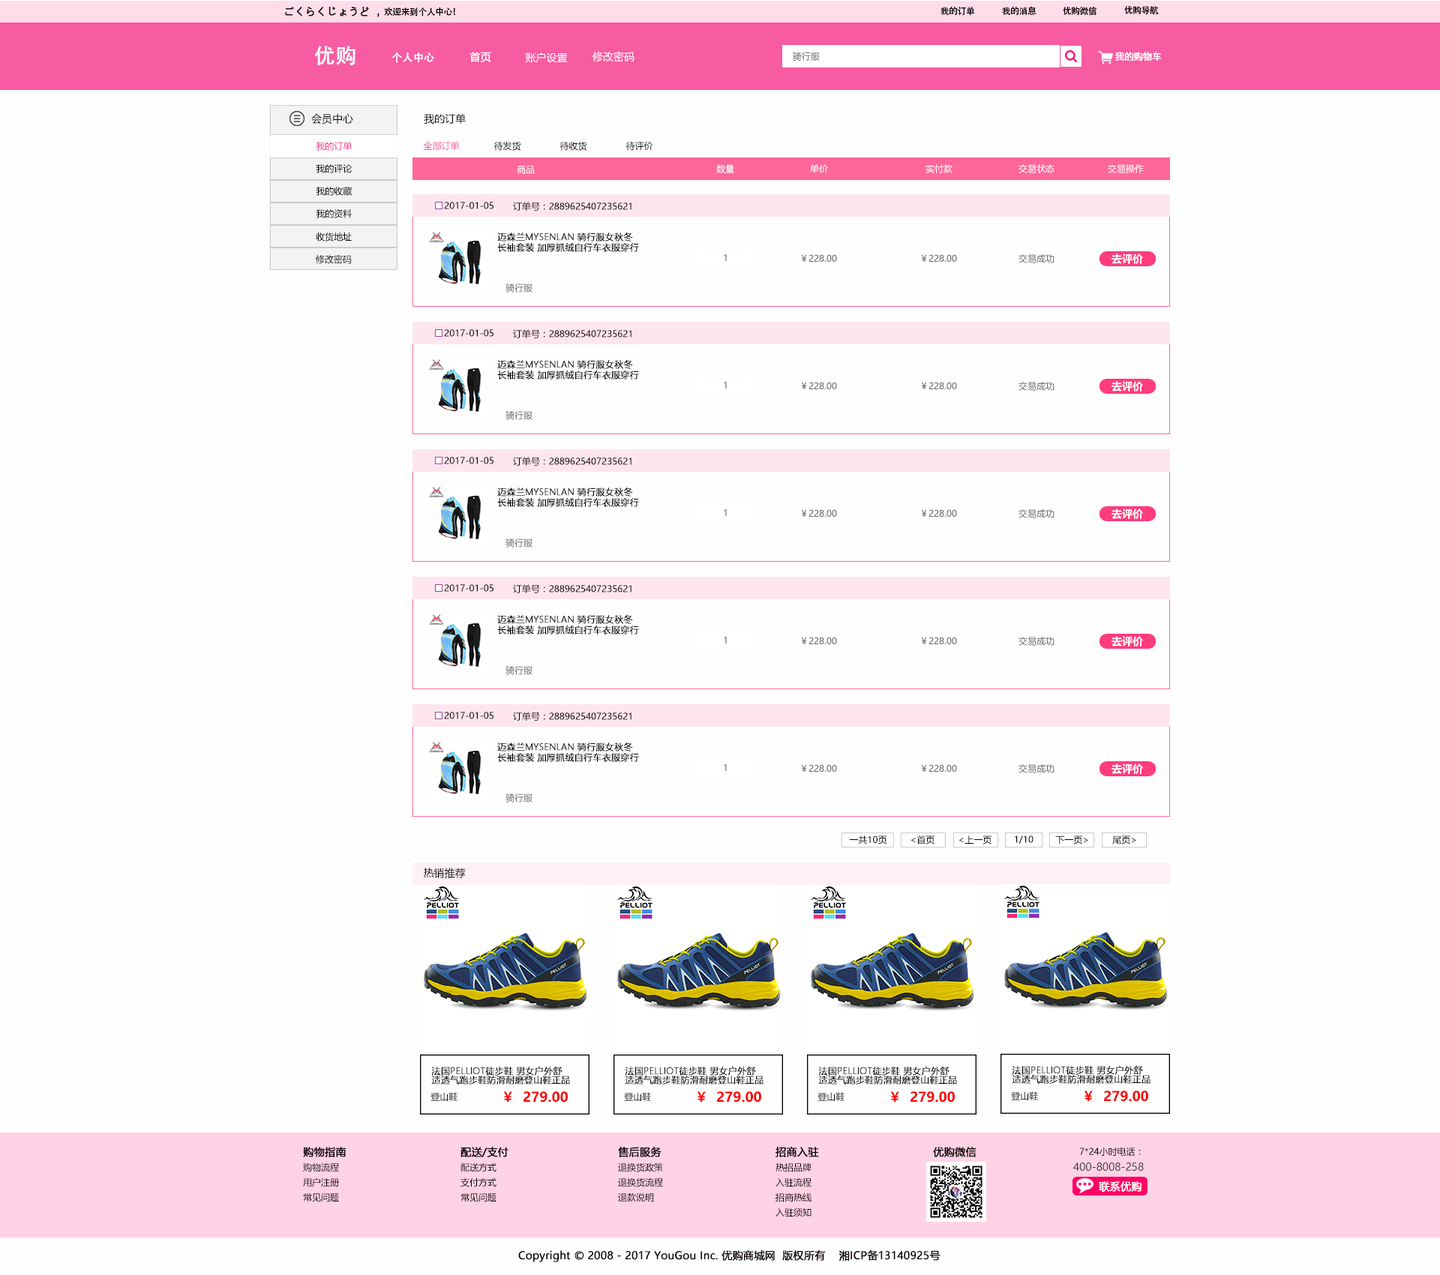
<style>
.page{position:relative;width:1440px;height:1275px;background:#fffeff}
.page>*{position:absolute;margin:0}
.t1{font:8.8px "AdobeHeitiStd-Regular";letter-spacing:-0.025em;color:#000000}
.t2{font:10.5px "MicrosoftYaHei";color:#040000;font-weight:bold}
.t3{font:21px "AdobeHeitiStd-Regular";color:#ffffff;font-weight:bold}
.t4{font:10.5px "AdobeHeitiStd-Regular";color:#ffffff;font-weight:bold}
.t5{font:10.5px "MicrosoftYaHei";color:#ffffff;font-weight:bold}
.t6{font:10.5px "MicrosoftYaHei";color:#ffffff}
.t7{font:9px "MicrosoftYaHei";color:#666666}
.t8{font:9px "MicrosoftYaHei";color:#ffffff;font-weight:bold}
.t9{font:10.5px "MicrosoftYaHei";color:#040000}
.t10{font:9px "MicrosoftYaHei";color:#f7398e}
.t11{font:9px "MicrosoftYaHei";color:#f75ba1}
.t12{font:9px "MicrosoftYaHei";color:#040000}
.t13{font:9px "MicrosoftYaHei";color:#000000}
.t14{font:9px "MicrosoftYaHei";color:#ffffff}
.t15{font:9px "MicrosoftYaHei";color:#060001}
.t16{font:9px/10.5px "MicrosoftYaHeiLight";color:#000000;font-weight:bold}
.t17{font:9px "MicrosoftYaHei"}
.t18{font:10.5px "MicrosoftYaHei-Bold";color:#ffffff}
.t19{font:9px/9px "MicrosoftYaHeiLight";color:#000000;font-weight:bold}
.t20{font:13.5px "MicrosoftYaHei-Bold";color:#fd0000}
.t21{font:10.5px "MicrosoftYaHei";color:#323333}
.t22{font:10.5px "MicrosoftYaHei";color:#0e050a;font-weight:bold}
</style>
<div class="page">
<p class="t1" style="left:940px;top:6px;width:35px;height:10px">我的订单</p>
<p class="t1" style="left:1002px;top:6px;width:34px;height:9px">我的消息</p>
<p class="t1" style="left:1063px;top:6px;width:33px;height:10px">优购微信</p>
<p class="t1" style="left:1124px;top:6px;width:35px;height:9px">优购导航</p>
<p class="t2" style="left:285px;top:7px;width:170px;height:10px">ごくらくじょうど ，<span class="t1">欢迎来到个人中心！</span></p>
<p class="t3" style="left:314px;top:46px;width:42px;height:19px">优购</p>
<p class="t4" style="left:392px;top:52px;width:42px;height:11px">个人中心</p>
<p class="t5" style="left:470px;top:52px;width:21px;height:10px">首页</p>
<p class="t6" style="left:525px;top:52px;width:43px;height:11px">账户设置</p>
<p class="t6" style="left:592px;top:51px;width:42px;height:11px">修改密码</p>
<p class="t7" style="left:793px;top:52px;width:27px;height:9px">骑行服</p>
<p class="t8" style="left:1115px;top:52px;width:47px;height:10px">我的购物车</p>
<p class="t9" style="left:311px;top:113px;width:42px;height:11px">会员中心</p>
<p class="t9" style="left:424px;top:113px;width:42px;height:11px">我的订单</p>
<p class="t10" style="left:316px;top:141px;width:36px;height:10px">我的订单</p>
<p class="t11" style="left:423px;top:141px;width:37px;height:10px">全部订单</p>
<p class="t12" style="left:494px;top:141px;width:27px;height:10px">待发货</p>
<p class="t12" style="left:560px;top:141px;width:27px;height:10px">待收货</p>
<p class="t12" style="left:626px;top:141px;width:27px;height:10px">待评价</p>
<p class="t13" style="left:316px;top:164px;width:36px;height:9px">我的评论</p>
<p class="t14" style="left:517px;top:165px;width:18px;height:9px">商品</p>
<p class="t14" style="left:716px;top:164px;width:18px;height:9px">数量</p>
<p class="t14" style="left:810px;top:164px;width:18px;height:9px">单价</p>
<p class="t14" style="left:926px;top:164px;width:26px;height:9px">实付款</p>
<p class="t14" style="left:1018px;top:164px;width:36px;height:9px">交易状态</p>
<p class="t14" style="left:1108px;top:164px;width:36px;height:9px">交易操作</p>
<p class="t15" style="left:316px;top:187px;width:36px;height:9px">我的收藏</p>
<p class="t15" style="left:316px;top:208px;width:36px;height:10px">我的资料</p>
<p class="t12" style="left:444px;top:202px;width:50px;height:7px">2017-01-05</p>
<p class="t12" style="left:513px;top:202px;width:119px;height:9px">订单号：2889625407235621</p>
<p class="t15" style="left:316px;top:232px;width:36px;height:10px">收货地址</p>
<p class="t16" style="left:497px;top:232px;width:142px;height:20px">迈森兰MYSENLAN 骑行服女秋冬<br>长袖套装 加厚抓绒自行车衣服穿行</p>
<p class="t15" style="left:316px;top:255px;width:36px;height:9px">修改密码</p>
<p class="t17" style="left:724px;top:254px;width:3px;height:7px">1</p>
<p class="t7" style="left:801px;top:254px;width:36px;height:8px">￥228.00</p>
<p class="t7" style="left:921px;top:254px;width:36px;height:8px">￥228.00</p>
<p class="t7" style="left:1018px;top:254px;width:36px;height:9px">交易成功</p>
<p class="t18" style="left:1112px;top:254px;width:31px;height:10px">去评价</p>
<p class="t7" style="left:506px;top:283px;width:26px;height:9px">骑行服</p>
<p class="t12" style="left:444px;top:329px;width:50px;height:8px">2017-01-05</p>
<p class="t12" style="left:513px;top:329px;width:119px;height:9px">订单号：2889625407235621</p>
<p class="t16" style="left:497px;top:360px;width:142px;height:20px">迈森兰MYSENLAN 骑行服女秋冬<br>长袖套装 加厚抓绒自行车衣服穿行</p>
<p class="t17" style="left:724px;top:381px;width:3px;height:7px">1</p>
<p class="t7" style="left:801px;top:382px;width:36px;height:7px">￥228.00</p>
<p class="t7" style="left:921px;top:382px;width:36px;height:7px">￥228.00</p>
<p class="t7" style="left:1018px;top:382px;width:36px;height:9px">交易成功</p>
<p class="t18" style="left:1112px;top:381px;width:31px;height:11px">去评价</p>
<p class="t7" style="left:506px;top:410px;width:26px;height:10px">骑行服</p>
<p class="t12" style="left:444px;top:457px;width:50px;height:7px">2017-01-05</p>
<p class="t12" style="left:513px;top:457px;width:119px;height:9px">订单号：2889625407235621</p>
<p class="t16" style="left:497px;top:488px;width:142px;height:19px">迈森兰MYSENLAN 骑行服女秋冬<br>长袖套装 加厚抓绒自行车衣服穿行</p>
<p class="t17" style="left:724px;top:508px;width:3px;height:8px">1</p>
<p class="t7" style="left:801px;top:509px;width:36px;height:8px">￥228.00</p>
<p class="t7" style="left:921px;top:509px;width:36px;height:8px">￥228.00</p>
<p class="t7" style="left:1018px;top:509px;width:36px;height:9px">交易成功</p>
<p class="t18" style="left:1112px;top:508px;width:31px;height:11px">去评价</p>
<p class="t7" style="left:506px;top:538px;width:26px;height:10px">骑行服</p>
<p class="t12" style="left:444px;top:584px;width:50px;height:8px">2017-01-05</p>
<p class="t12" style="left:513px;top:584px;width:119px;height:9px">订单号：2889625407235621</p>
<p class="t16" style="left:497px;top:615px;width:142px;height:19px">迈森兰MYSENLAN 骑行服女秋冬<br>长袖套装 加厚抓绒自行车衣服穿行</p>
<p class="t17" style="left:724px;top:636px;width:3px;height:8px">1</p>
<p class="t7" style="left:801px;top:637px;width:36px;height:7px">￥228.00</p>
<p class="t7" style="left:921px;top:637px;width:36px;height:7px">￥228.00</p>
<p class="t7" style="left:1018px;top:637px;width:36px;height:9px">交易成功</p>
<p class="t18" style="left:1112px;top:636px;width:31px;height:10px">去评价</p>
<p class="t7" style="left:506px;top:665px;width:26px;height:10px">骑行服</p>
<p class="t12" style="left:444px;top:712px;width:50px;height:7px">2017-01-05</p>
<p class="t12" style="left:513px;top:712px;width:119px;height:9px">订单号：2889625407235621</p>
<p class="t16" style="left:497px;top:742px;width:142px;height:20px">迈森兰MYSENLAN 骑行服女秋冬<br>长袖套装 加厚抓绒自行车衣服穿行</p>
<p class="t17" style="left:724px;top:764px;width:3px;height:7px">1</p>
<p class="t7" style="left:801px;top:764px;width:36px;height:8px">￥228.00</p>
<p class="t7" style="left:921px;top:764px;width:36px;height:8px">￥228.00</p>
<p class="t7" style="left:1018px;top:764px;width:36px;height:9px">交易成功</p>
<p class="t18" style="left:1112px;top:764px;width:31px;height:10px">去评价</p>
<p class="t7" style="left:506px;top:793px;width:26px;height:9px">骑行服</p>
<p class="t13" style="left:849px;top:836px;width:38px;height:8px">一共10页</p>
<p class="t13" style="left:911px;top:836px;width:23px;height:8px">&lt;首页</p>
<p class="t13" style="left:959px;top:836px;width:33px;height:8px">&lt;上一页</p>
<p class="t13" style="left:1015px;top:836px;width:19px;height:8px">1/10</p>
<p class="t13" style="left:1055px;top:836px;width:33px;height:8px">下一页&gt;</p>
<p class="t13" style="left:1112px;top:836px;width:24px;height:8px">尾页&gt;</p>
<p class="t9" style="left:424px;top:868px;width:42px;height:10px">热销推荐</p>
<p class="t19" style="left:431px;top:1066px;width:139px;height:18px">法国PELLIOT徒步鞋 男女户外舒<br>适透气跑步鞋防滑耐磨登山鞋正品</p>
<p class="t19" style="left:625px;top:1066px;width:139px;height:18px">法国PELLIOT徒步鞋 男女户外舒<br>适透气跑步鞋防滑耐磨登山鞋正品</p>
<p class="t19" style="left:818px;top:1066px;width:139px;height:18px">法国PELLIOT徒步鞋 男女户外舒<br>适透气跑步鞋防滑耐磨登山鞋正品</p>
<p class="t19" style="left:1012px;top:1066px;width:138px;height:18px">法国PELLIOT徒步鞋 男女户外舒<br>适透气跑步鞋防滑耐磨登山鞋正品</p>
<p class="t12" style="left:430px;top:1092px;width:28px;height:10px">登山鞋</p>
<p class="t20" style="left:503px;top:1091px;width:65px;height:11px">￥  279.00</p>
<p class="t12" style="left:624px;top:1092px;width:27px;height:10px">登山鞋</p>
<p class="t20" style="left:697px;top:1091px;width:64px;height:11px">￥  279.00</p>
<p class="t12" style="left:818px;top:1092px;width:26px;height:10px">登山鞋</p>
<p class="t20" style="left:890px;top:1091px;width:65px;height:11px">￥  279.00</p>
<p class="t12" style="left:1011px;top:1091px;width:27px;height:10px">登山鞋</p>
<p class="t20" style="left:1084px;top:1090px;width:64px;height:12px">￥  279.00</p>
<p class="t2" style="left:303px;top:1147px;width:43px;height:10px">购物指南</p>
<p class="t2" style="left:460px;top:1147px;width:48px;height:10px">配送/支付</p>
<p class="t2" style="left:618px;top:1147px;width:44px;height:10px">售后服务</p>
<p class="t2" style="left:776px;top:1147px;width:43px;height:10px">招商入驻</p>
<p class="t2" style="left:933px;top:1147px;width:43px;height:10px">优购微信</p>
<p class="t12" style="left:1079px;top:1147px;width:62px;height:9px">7*24小时电话：</p>
<p class="t12" style="left:303px;top:1162px;width:36px;height:10px">购物流程</p>
<p class="t12" style="left:460px;top:1162px;width:36px;height:10px">配送方式</p>
<p class="t12" style="left:618px;top:1162px;width:45px;height:10px">退换货政策</p>
<p class="t12" style="left:776px;top:1162px;width:36px;height:10px">热招品牌</p>
<p class="t21" style="left:1073px;top:1162px;width:71px;height:9px">400-8008-258</p>
<p class="t12" style="left:303px;top:1178px;width:36px;height:9px">用户注册</p>
<p class="t12" style="left:460px;top:1178px;width:36px;height:9px">支付方式</p>
<p class="t12" style="left:618px;top:1178px;width:45px;height:9px">退换货流程</p>
<p class="t12" style="left:776px;top:1178px;width:36px;height:9px">入驻流程</p>
<p class="t5" style="left:1099px;top:1181px;width:43px;height:11px">联系优购</p>
<p class="t12" style="left:303px;top:1192px;width:36px;height:10px">常见问题</p>
<p class="t12" style="left:460px;top:1192px;width:36px;height:10px">常见问题</p>
<p class="t12" style="left:618px;top:1192px;width:36px;height:10px">退款说明</p>
<p class="t12" style="left:776px;top:1192px;width:36px;height:10px">招商热线</p>
<p class="t12" style="left:776px;top:1208px;width:36px;height:9px">入驻须知</p>
<p class="t22" style="left:518px;top:1250px;width:422px;height:12px">Copyright © 2008 - 2017 YouGou Inc. 优购商城网  版权所有    湘ICP备13140925号</p>
</div>
